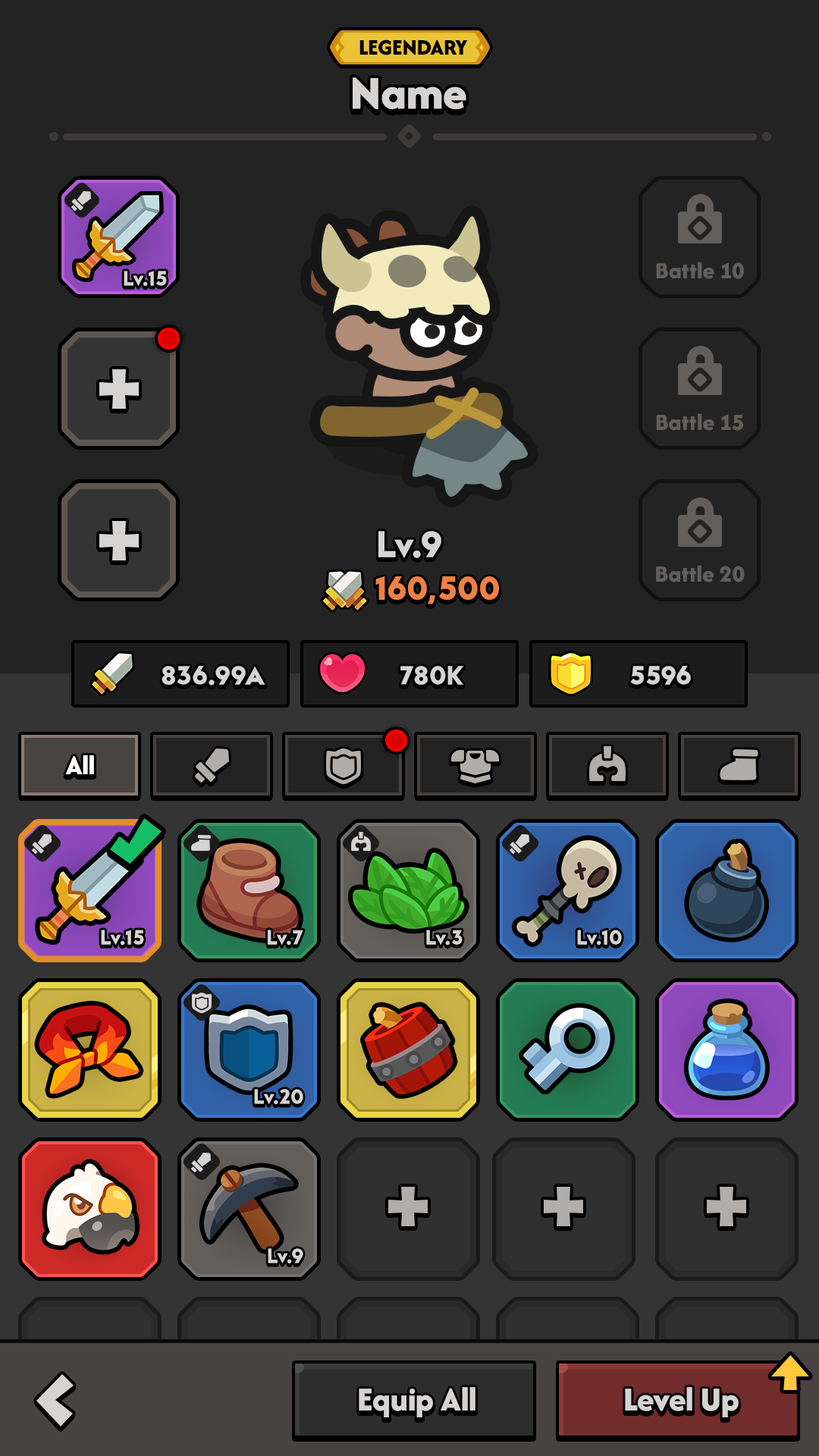
<style>
.page{position:relative;width:819px;height:1456px;background:#232323}
.page>*{position:absolute;margin:0}
.t1{font:22.9px "AfacadFlux-ExtraBold";letter-spacing:-0.02em;color:#000000;text-transform:uppercase}
.t2{font:48.5px "AfacadFlux-ExtraBold";color:#d6d4d3}
.t3{font:24.3px "AfacadFlux-ExtraBold";color:#625e5b}
.t4{font:21.2px "LTAvocado-Bold";color:#d6d4d3}
.t5{font:37.9px "LTAvocado-Bold";color:#d6d4d3}
.t6{font:34.1px "LTAvocado-Bold";color:#ee8145}
.t7{font:27.3px "LTAvocado-Bold";color:#d6d4d3}
.t8{font:28.4px "AfacadFlux-ExtraBold";color:#ffffff}
.t9{font:35px "AfacadFlux-ExtraBold";color:#d6d4d3}
</style>
<div class="page">
<p class="t1" style="left:359px;top:39px;width:109px;height:16px">Legendary</p>
<p class="t2" style="left:353px;top:77px;width:113px;height:32px">Name</p>
<p class="t3" style="left:656px;top:262px;width:88px;height:17px">Battle 10</p>
<p class="t4" style="left:124px;top:271px;width:43px;height:15px">Lv.15</p>
<p class="t3" style="left:656px;top:413px;width:87px;height:18px">Battle 15</p>
<p class="t5" style="left:378px;top:531px;width:63px;height:27px">Lv.9</p>
<p class="t3" style="left:656px;top:565px;width:89px;height:17px">Battle 20</p>
<p class="t6" style="left:375px;top:576px;width:124px;height:28px">160,500</p>
<p class="t7" style="left:162px;top:666px;width:103px;height:20px">836.99A</p>
<p class="t7" style="left:400px;top:666px;width:64px;height:19px">780K</p>
<p class="t7" style="left:630px;top:666px;width:61px;height:19px">5596</p>
<p class="t8" style="left:65px;top:755px;width:29px;height:19px">All</p>
<p class="t8" style="left:65px;top:755px;width:29px;height:19px">All</p>
<p class="t4" style="left:101px;top:930px;width:43px;height:15px">Lv.15</p>
<p class="t4" style="left:268px;top:930px;width:35px;height:15px">Lv.7</p>
<p class="t4" style="left:426px;top:930px;width:37px;height:15px">Lv.3</p>
<p class="t4" style="left:577px;top:930px;width:45px;height:15px">Lv.10</p>
<p class="t4" style="left:254px;top:1089px;width:49px;height:15px">Lv.20</p>
<p class="t4" style="left:268px;top:1248px;width:35px;height:15px">Lv.9</p>
<p class="t9" style="left:359px;top:1387px;width:116px;height:30px">Equip All</p>
<p class="t9" style="left:625px;top:1387px;width:114px;height:30px">Level Up</p>
</div>
